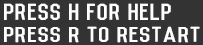
<style>
.page{position:relative;width:203px;height:45px;background:#333333}
.page>*{position:absolute;margin:0}
.t1{font:21.4px "Vincent-Regular";color:#ffffff;scale:1.22 1}
.t2{font:19.9px "Vincent-Regular";color:#ffffff;scale:1.31 1}
</style>
<div class="page">
<p class="t1" style="left:4px;top:3px;width:167px;height:17px">Press H for Help</p>
<p class="t2" style="left:4px;top:26px;width:196px;height:17px">Press R to Restart</p>
</div>
